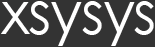
<style>
.page{position:relative;width:155px;height:47px;background:#333333}
.page>*{position:absolute;margin:0}
.t1{font:60px "CenturyGothic";letter-spacing:-0.025em;color:#ffffff}
</style>
<div class="page">
<p class="t1" style="left:1px;top:1px;width:153px;height:45px">xsysys</p>
</div>
